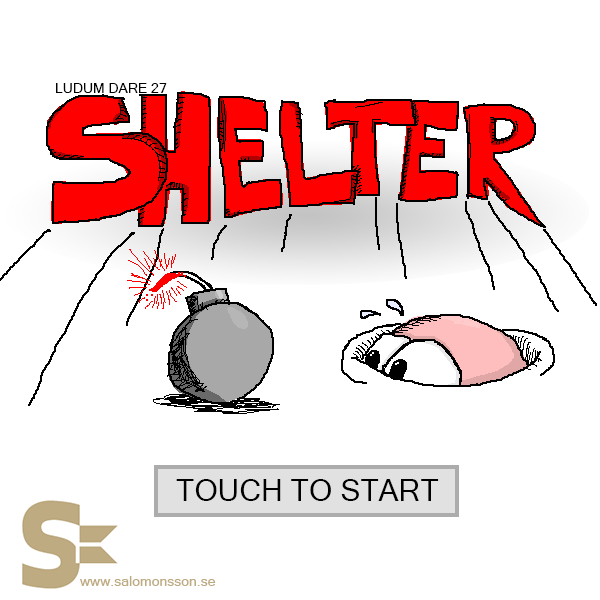
<style>
.page{position:relative;width:600px;height:600px;background:#ffffff}
.page>*{position:absolute;margin:0}
.t1{font:14px "MicrosoftSansSerif";color:#000000}
.t2{font:30px "MicrosoftSansSerif";color:#000000}
.t3{font:14px "MicrosoftSansSerif";color:#beab82}
</style>
<div class="page">
<p class="t1" style="left:56px;top:83px;width:111px;height:10px">LUDUM DARE 27</p>
<p class="t2" style="left:176px;top:479px;width:263px;height:22px">TOUCH TO START</p>
<p class="t3" style="left:79px;top:576px;width:137px;height:10px">www.salomonsson.se</p>
</div>
